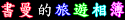
<style>
.page{position:relative;width:125px;height:20px;background:#000000}
.page>*{position:absolute;margin:0}
.t1{font:16px "DFKaiShu-SB-Estd-BF";color:#ffffff}
</style>
<div class="page">
<p class="t1" style="left:1px;top:2px;width:14px;height:15px">書</p>
<p class="t1" style="left:19px;top:2px;width:14px;height:16px">曼</p>
<p class="t1" style="left:38px;top:3px;width:13px;height:14px">的</p>
<p class="t1" style="left:55px;top:3px;width:16px;height:13px">旅</p>
<p class="t1" style="left:73px;top:3px;width:16px;height:14px">遊</p>
<p class="t1" style="left:92px;top:3px;width:14px;height:14px">相</p>
<p class="t1" style="left:110px;top:2px;width:14px;height:15px">簿</p>
</div>
